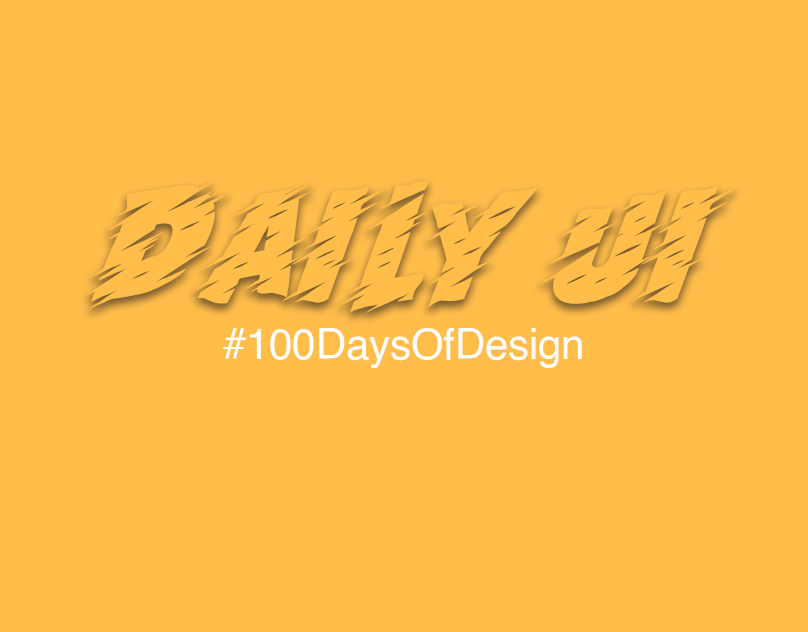
<style>
.page{position:relative;width:808px;height:632px;background:#ffbd4a}
.page>*{position:absolute;margin:0}
.t1{font:104.2px "Run!";color:#ffbd4a}
.t2{font:41.7px "Helvetica";color:#ffffff}
</style>
<div class="page">
<p class="t1" style="left:86px;top:181px;width:650px;height:132px">DAILY UI</p>
<p class="t2" style="left:223px;top:328px;width:359px;height:40px">#100DaysOfDesign</p>
</div>
